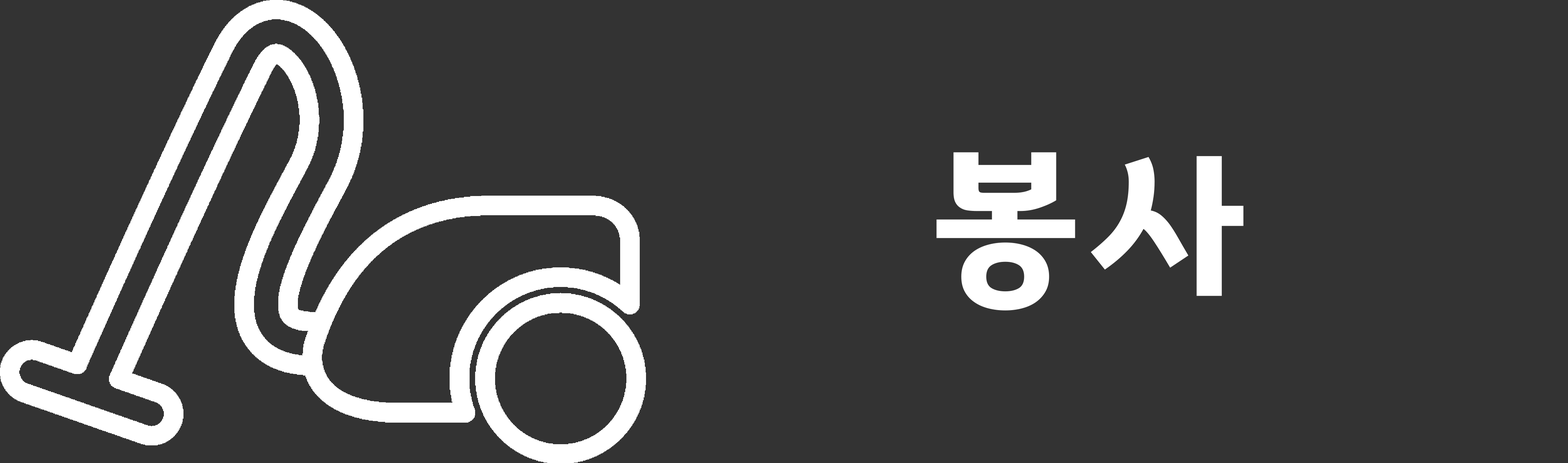
<style>
.page{position:relative;width:1568px;height:463px;background:#333333}
.page>*{position:absolute;margin:0}
.t1{font:173.1px "GyeonggiTitleV";letter-spacing:-0.08em;color:#ffffff}
</style>
<div class="page">
<p class="t1" style="left:936px;top:152px;width:307px;height:158px">봉사</p>
</div>
